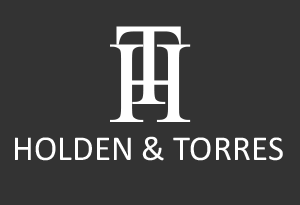
<style>
.page{position:relative;width:300px;height:205px;background:#333333}
.page>*{position:absolute;margin:0}
.t1{font:117.2px "MongolianBaiti";color:#ffffff}
.t2{font:35.1px "Calibri";color:#ffffff}
</style>
<div class="page">
<p class="t1" style="left:116px;top:26px;width:65px;height:78px">T</p>
<p class="t1" style="left:110px;top:44px;width:81px;height:78px">H</p>
<p class="t2" style="left:15px;top:136px;width:268px;height:25px">HOLDEN &amp; TORRES</p>
</div>
